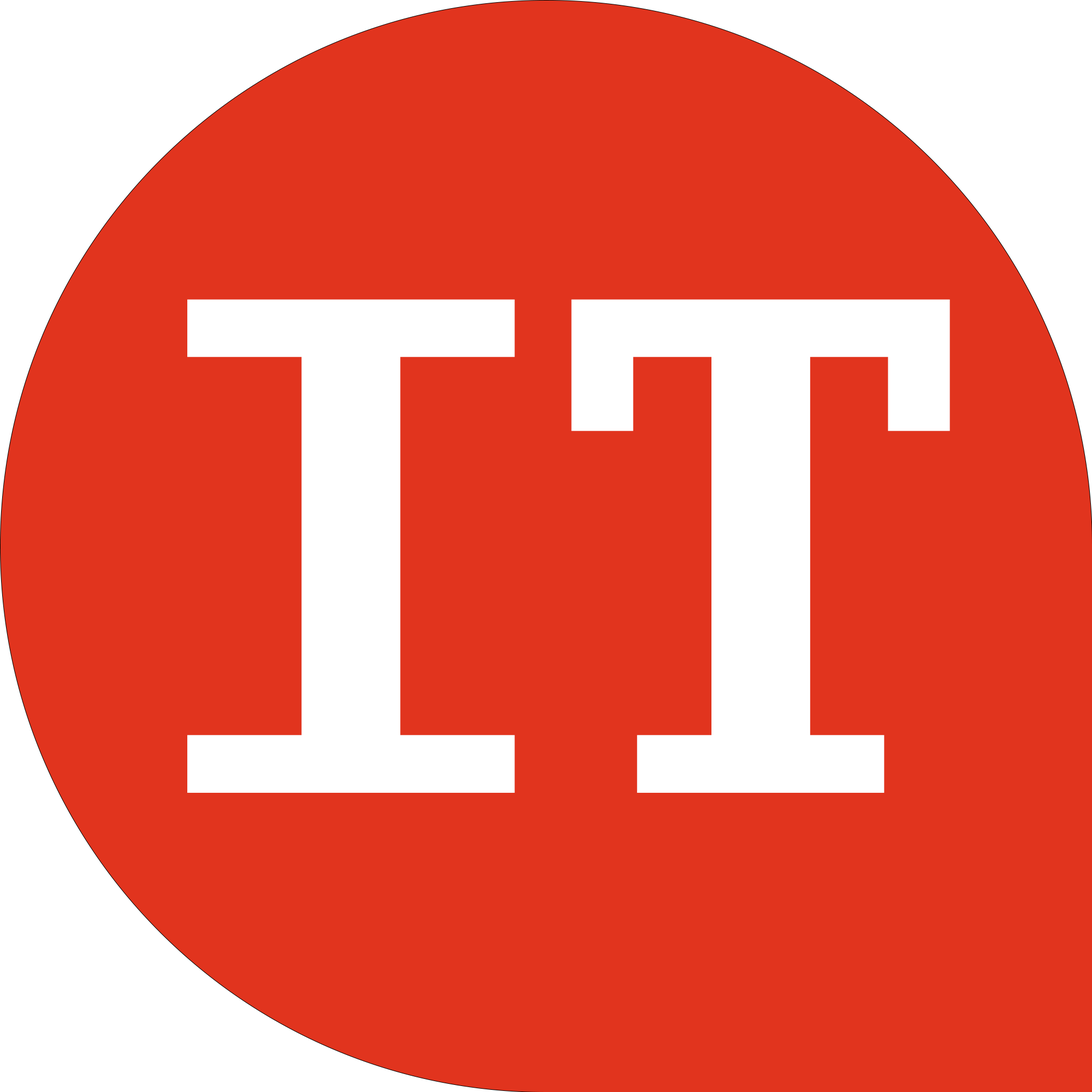
<style>
.page{position:relative;width:1092px;height:1092px;background:#e1341e}
.page>*{position:absolute;margin:0}
.t1{font:682.5px "GoMonoForPowerline-Bold";color:#ffffff}
</style>
<div class="page">
<p class="t1" style="left:187px;top:299px;width:763px;height:494px">IT</p>
</div>
